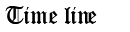
<style>
.page{position:relative;width:130px;height:32px;background:#ffffff}
.page>*{position:absolute;margin:0}
.t1{font:24px "OldEnglishTextMT";color:#000000}
</style>
<div class="page">
<p class="t1" style="left:5px;top:6px;width:92px;height:18px">Time line</p>
</div>
